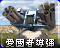
<style>
.page{position:relative;width:60px;height:48px}
.page>*{position:absolute;margin:0}
.t1{font:9px "Zfull-GB";letter-spacing:0.225em;color:#ffffff}
</style>
<div class="page">
<p class="t1" style="left:6px;top:39px;width:48px;height:8px">愛國者導彈</p>
</div>
